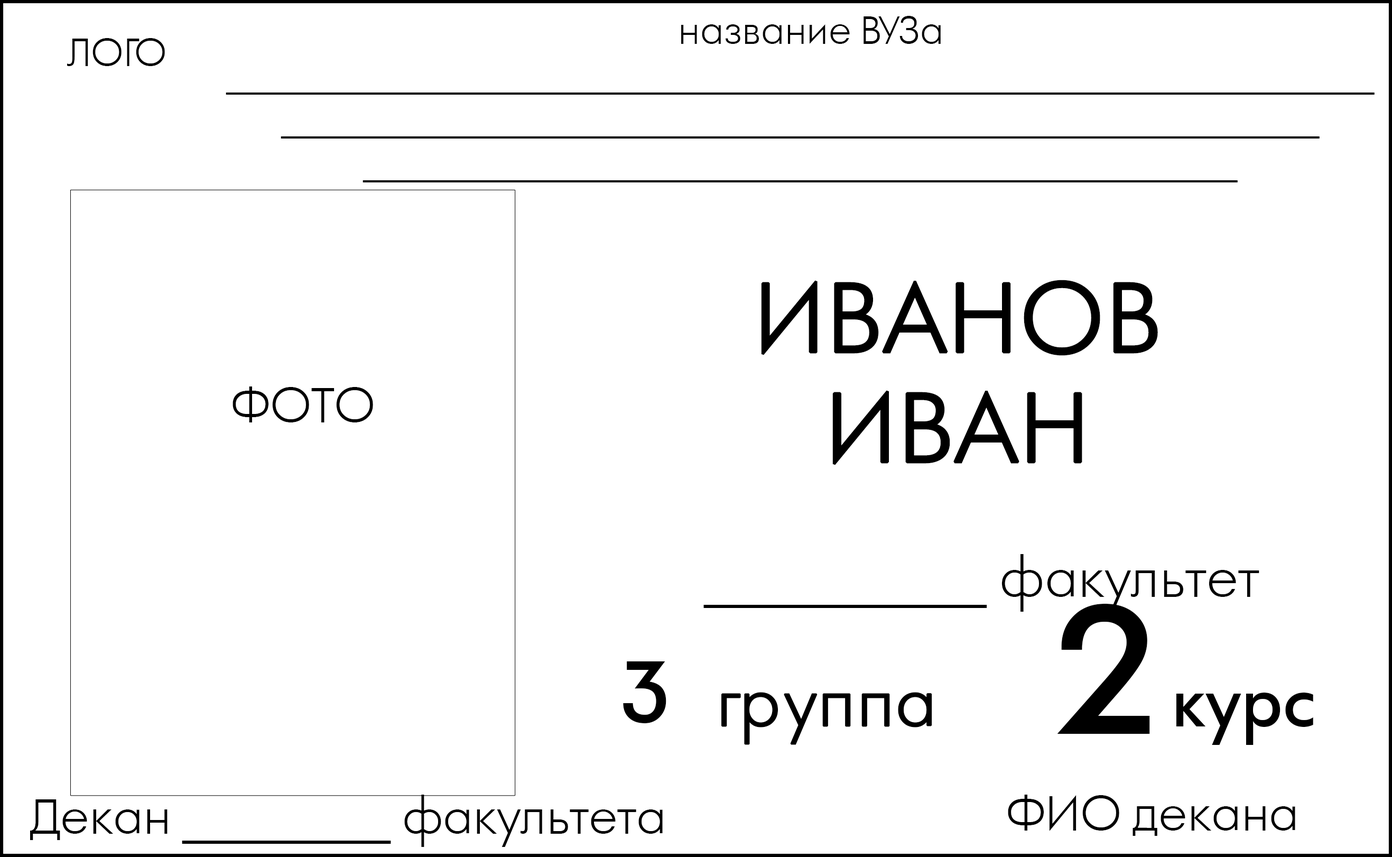
<style>
.page{position:relative;width:1392px;height:857px;background:#ffffff}
.page>*{position:absolute;margin:0}
.t1{font:36.4px "AFuturaOrtoLtLight";color:#000000}
.t2{font:93.7px "AFuturaOrtoLtLight";color:#000000;font-weight:bold}
.t3{font:46.2px "AFuturaOrtoLtLight";color:#000000}
.t4{font:51.4px "AFuturaOrtoLtLight";color:#000000}
.t5{font:172.1px "AFuturaOrtoLtBold";color:#000000}
.t6{font:82.2px "AFuturaOrtoLtBold";color:#000000}
.t7{font:62.5px "AFuturaOrtoLtLight";color:#000000;font-weight:bold}
.t8{font:62.9px "AFuturaOrtoLtBold";color:#000000}
</style>
<div class="page">
<p class="t1" style="left:226px;top:16px;width:1149px;height:166px;text-align:center">название ВУЗа_______________________________________________________________<br>_________________________________________________________<br>________________________________________________</p>
<p class="t1" style="left:67px;top:38px;width:98px;height:28px">ЛОГО</p>
<p class="t2" style="left:761px;top:280px;width:397px;height:76px">ИВАНОВ</p>
<p class="t3" style="left:233px;top:386px;width:140px;height:36px">ФОТО</p>
<p class="t2" style="left:832px;top:390px;width:250px;height:75px">ИВАН</p>
<p class="t4" style="left:703px;top:554px;width:556px;height:57px">___________ факультет</p>
<p class="t5" style="left:1057px;top:604px;width:93px;height:130px">2</p>
<p class="t6" style="left:623px;top:661px;width:43px;height:62px">3</p>
<p class="t7" style="left:721px;top:692px;width:211px;height:53px">группа</p>
<p class="t8" style="left:1176px;top:692px;width:137px;height:53px">курс</p>
<p class="t3" style="left:30px;top:794px;width:633px;height:53px;text-align:center">Декан _________ факультета<br>_____</p>
<p class="t3" style="left:1008px;top:794px;width:287px;height:42px">ФИО декана</p>
</div>
